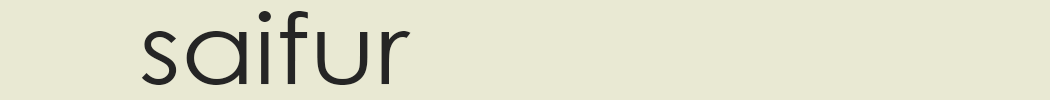
<style>
.page{position:relative;width:1050px;height:100px;background:#e9e9d3}
.page>*{position:absolute;margin:0}
.t1{font:98.3px "CenturyGothic";color:#252525;scale:1.1 1}
.t2{font:98.3px "CenturyGothic";scale:1.1 1}
</style>
<div class="page">
<p class="t1" style="left:141px;top:11px;width:130px;height:74px">sai</p>
<p class="t1" style="left:141px;top:11px;width:167px;height:74px">saif</p>
<p class="t1" style="left:141px;top:11px;width:227px;height:74px">saifu</p>
<p class="t1" style="left:141px;top:11px;width:270px;height:74px">saifur</p>
<p class="t1" style="left:141px;top:11px;width:305px;height:74px">saifurs</p>
<p class="t1" style="left:141px;top:11px;width:375px;height:74px">saifurso</p>
<p class="t1" style="left:141px;top:11px;width:412px;height:74px">saifursof</p>
<p class="t2" style="left:141px;top:11px;width:448px;height:74px">saifursoft</p>
<p class="t2" style="left:141px;top:11px;width:474px;height:74px">saifursoft.</p>
<p class="t2" style="left:141px;top:11px;width:545px;height:74px">saifursoft.c</p>
<p class="t2" style="left:141px;top:11px;width:617px;height:74px">saifursoft.co</p>
<p class="t2" style="left:141px;top:11px;width:716px;height:74px">saifursoft.com</p>
<p class="t1" style="left:141px;top:31px;width:36px;height:54px">s</p>
<p class="t1" style="left:141px;top:31px;width:106px;height:54px">sa</p>
</div>
